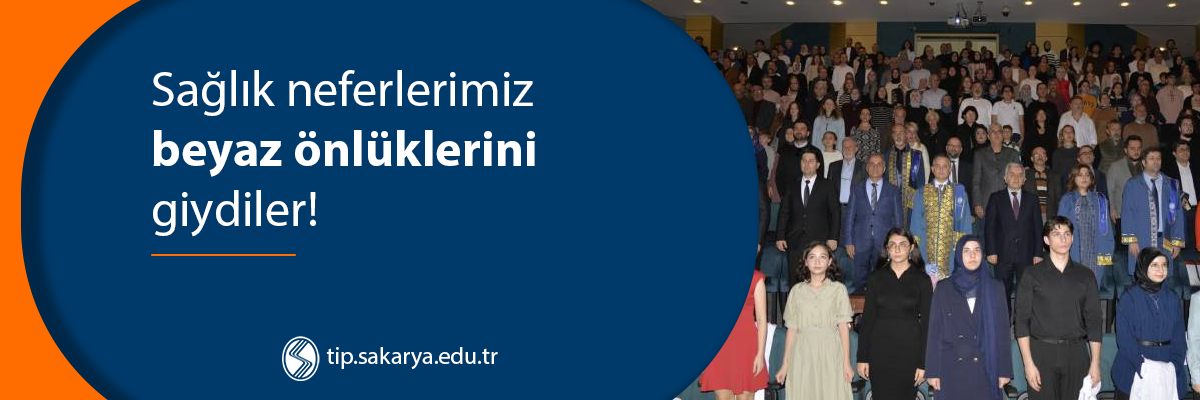
<style>
.page{position:relative;width:1200px;height:400px;background:#003a6a}
.page>*{position:absolute;margin:0}
.t1{font:50px "MyriadPro-Regular";color:#ffffff}
.t2{font:50px "MyriadPro-Bold";color:#ffffff}
.t3{font:24px "MyriadPro-Regular";color:#ffffff}
</style>
<div class="page">
<p class="t1" style="left:152px;top:70px;width:383px;height:167px">Sağlık neferlerimiz<br><span class="t2">beyaz önlüklerini<br></span>giydiler!</p>
<p class="t3" style="left:326px;top:347px;width:172px;height:22px">tip.sakarya.edu.tr</p>
</div>
